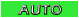
<style>
.page{position:relative;width:79px;height:18px;background:#34e938}
.page>*{position:absolute;margin:0}
.t1{font:15px "ErasITC-Bold";scale:0.96 1}
</style>
<div class="page">
<p class="t1" style="left:17px;top:4px;width:45px;height:11px">AUTO</p>
</div>
